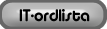
<style>
.page{position:relative;width:107px;height:29px}
.page>*{position:absolute;margin:0}
.t1{font:16.7px "Alba";color:#000000}
</style>
<div class="page">
<p class="t1" style="left:19px;top:9px;width:71px;height:13px">IT-ordlista</p>
</div>
